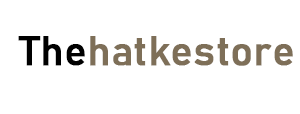
<style>
.page{position:relative;width:300px;height:114px;background:#ffffff}
.page>*{position:absolute;margin:0}
.t1{font:70px "Bahnschrift";color:#7e6f58;font-weight:bold}
.t2{font:70px "Bahnschrift";color:#000000;font-weight:bold}
</style>
<div class="page">
<p class="t1" style="left:18px;top:36px;width:275px;height:30px"><span class="t2">The</span>hatkestore</p>
</div>
